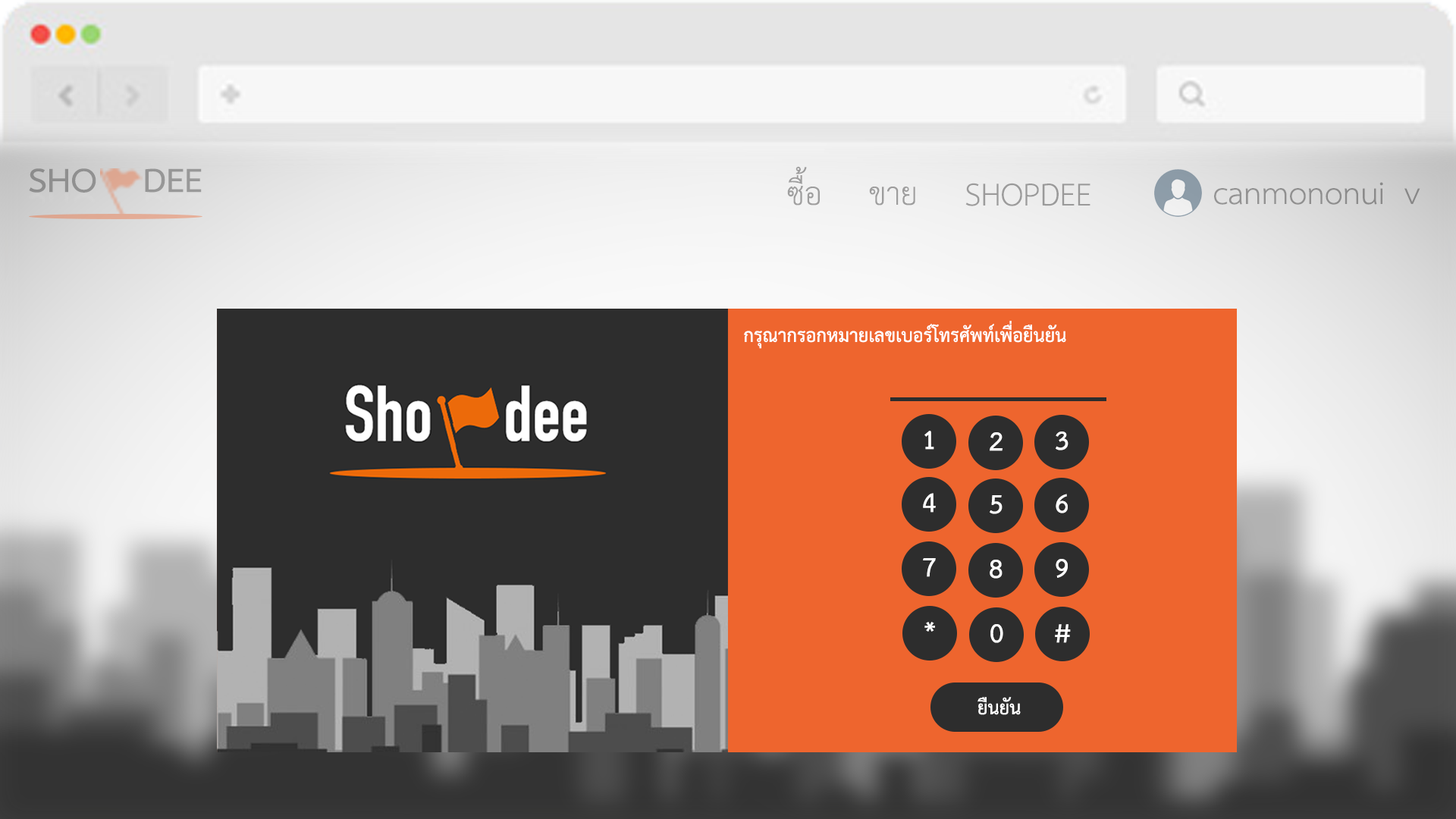
<style>
.page{position:relative;width:1456px;height:819px}
.page>*{position:absolute;margin:0}
.t1{font:48.3px "THSarabunPSK-Bold";color:#929292;scale:1.05 1}
.t2{font:45.5px "THSarabunPSK";color:#9e9e9e}
.t3{font:45.5px "THSarabunPSK";color:#9a9a9a}
.t4{font:45.5px "THSarabunPSK";color:#908f8f}
.t5{font:45.5px "THSarabunPSK";color:#9d9d9d}
.t6{font:26.5px "THSarabunPSK-Bold";color:#ffffff}
.t7{font:37.9px "THSarabunPSK-Bold";color:#ffffff}
</style>
<div class="page">
<p class="t1" style="left:29px;top:168px;width:173px;height:25px">SHO    DEE</p>
<p class="t2" style="left:787px;top:166px;width:33px;height:40px">ซื้อ</p>
<p class="t3" style="left:965px;top:183px;width:125px;height:23px">SHOPDEE</p>
<p class="t4" style="left:1214px;top:182px;width:206px;height:23px">canmononui  v</p>
<p class="t5" style="left:869px;top:187px;width:46px;height:19px">ขาย</p>
<p class="t6" style="left:744px;top:321px;width:322px;height:28px">กรุณากรอกหมายเลขเบอร์โทรศัพท์เพื่อยืนยัน</p>
<p class="t7" style="left:924px;top:431px;width:10px;height:19px">1</p>
<p class="t7" style="left:990px;top:432px;width:13px;height:19px">2</p>
<p class="t7" style="left:1056px;top:431px;width:12px;height:19px">3</p>
<p class="t7" style="left:923px;top:493px;width:13px;height:20px">4</p>
<p class="t7" style="left:990px;top:495px;width:13px;height:19px">5</p>
<p class="t7" style="left:1056px;top:494px;width:12px;height:19px">6</p>
<p class="t7" style="left:923px;top:558px;width:13px;height:19px">7</p>
<p class="t7" style="left:990px;top:560px;width:13px;height:19px">8</p>
<p class="t7" style="left:1056px;top:559px;width:12px;height:19px">9</p>
<p class="t7" style="left:924px;top:622px;width:11px;height:10px">*</p>
<p class="t7" style="left:990px;top:624px;width:13px;height:19px">0</p>
<p class="t7" style="left:1055px;top:624px;width:16px;height:19px">#</p>
<p class="t6" style="left:977px;top:697px;width:44px;height:18px">ยืนยัน</p>
</div>
